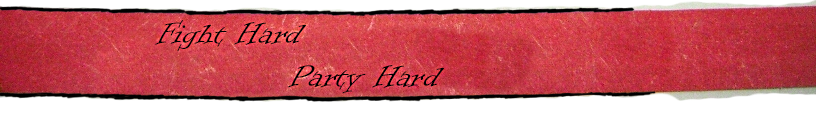
<style>
.page{position:relative;width:816px;height:140px;background:#ffffff}
.page>*{position:absolute;margin:0}
.t1{font:36px "InformalRoman-Regular";color:#000000}
</style>
<div class="page">
<p class="t1" style="left:155px;top:20px;width:289px;height:74px">Fight Hard<br>           Party Hard</p>
</div>
